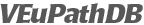
<style>
.page{position:relative;width:144px;height:25px;background:#ffffff}
.page>*{position:absolute;margin:0}
.t1{font:26.5px "PopplLaudatio-Bold";letter-spacing:-0.03em;color:#585858;font-style:italic}
</style>
<div class="page">
<p class="t1" style="left:0px;top:3px;width:143px;height:21px">VEuPathDB</p>
</div>
